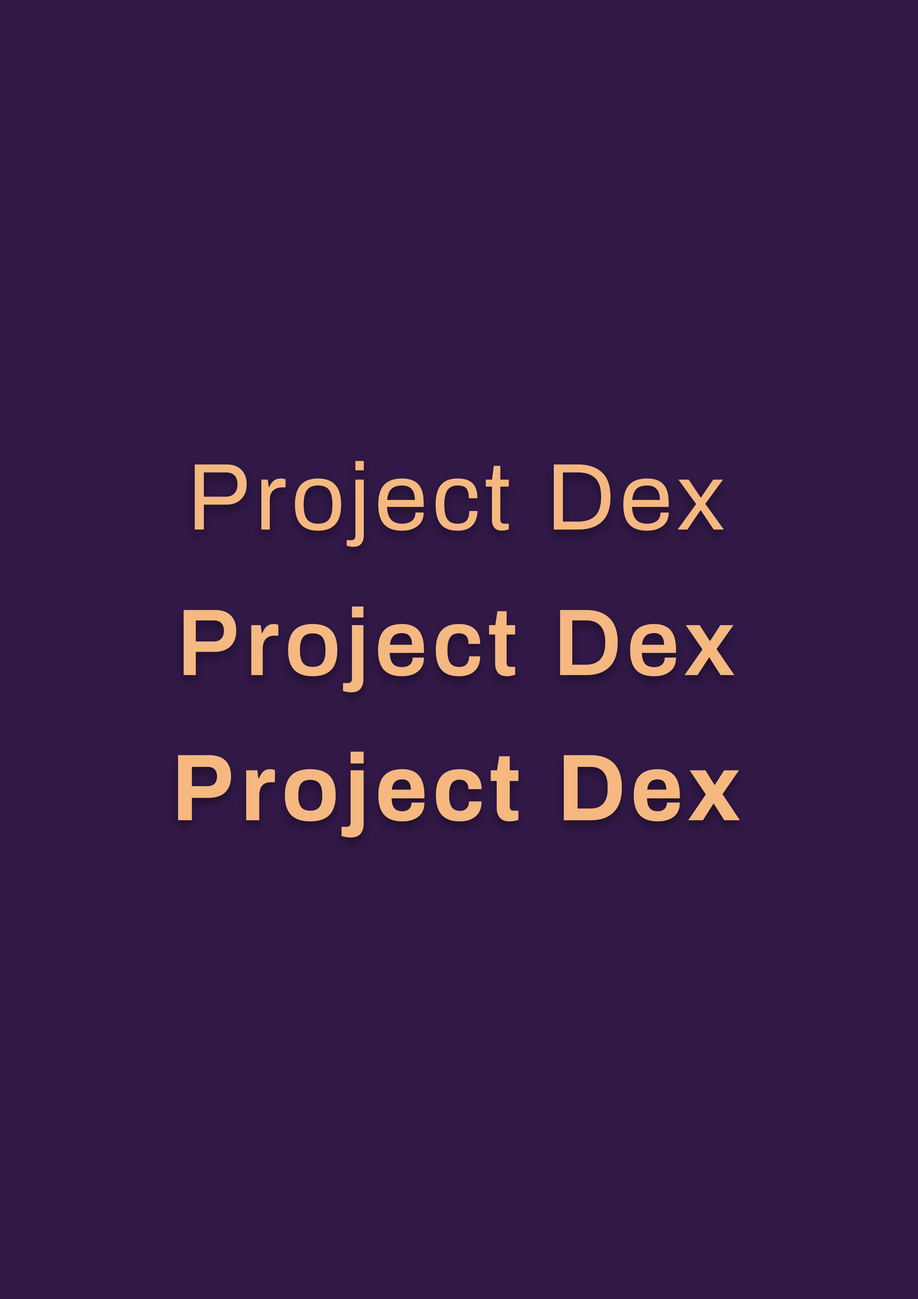
<style>
.page{position:relative;width:918px;height:1299px;background:#311847}
.page>*{position:absolute;margin:0}
.t1{font:94.8px "Archivo-Regular";letter-spacing:0.05em;color:#f5b880}
.t2{font:94.8px "Archivo-SemiBold";letter-spacing:0.05em;color:#f5b880}
.t3{font:94.8px "Archivo-Bold";letter-spacing:0.05em;color:#f5b880}
</style>
<div class="page">
<p class="t1" style="left:195px;top:461px;width:529px;height:86px">Project Dex</p>
<p class="t2" style="left:184px;top:606px;width:551px;height:86px">Project Dex</p>
<p class="t3" style="left:178px;top:751px;width:562px;height:86px">Project Dex</p>
</div>
